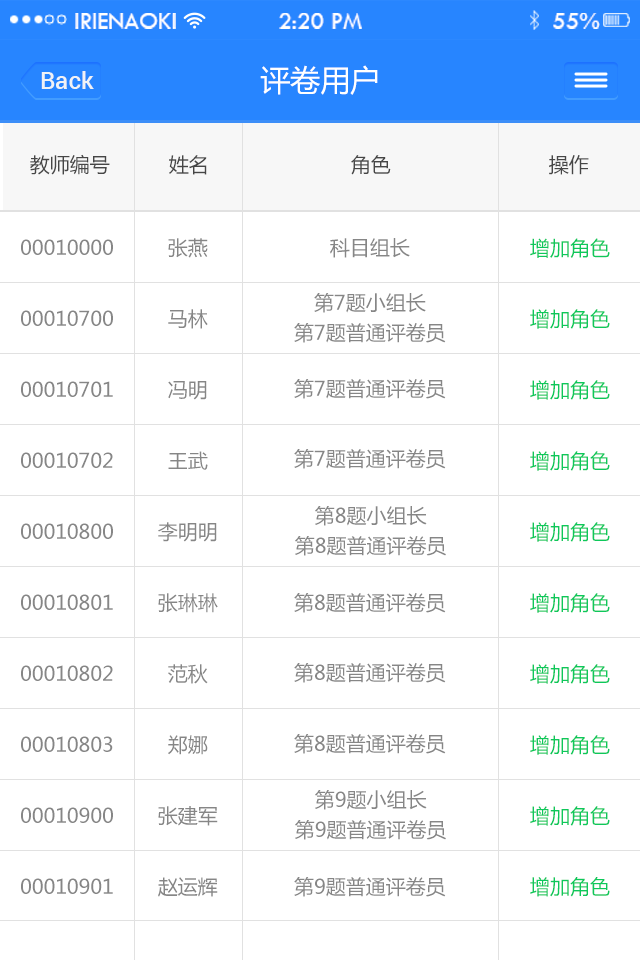
<style>
.page{position:relative;width:640px;height:960px;background:#ffffff}
.page>*{position:absolute;margin:0}
.t1{font:24px "TwCenMT-Regular";color:#ffffff}
.t2{font:30px "MicrosoftYaHei";color:#ffffff}
.t3{font:24px "Roboto-Medium";color:#f0f2f5}
.t4{font:20px "MicrosoftYaHei";color:#464646}
.t5{font:20px/71px "MicrosoftYaHei";color:#868686}
.t6{font:20px "MicrosoftYaHei";color:#868686}
.t7{font:20px/71px "MicrosoftYaHei";color:#0ec85b}
.t8{font:20px/30px "MicrosoftYaHei";color:#868686}
</style>
<div class="page">
<p class="t1" style="left:75px;top:13px;width:101px;height:16px">IRIENAOKI</p>
<p class="t1" style="left:279px;top:13px;width:83px;height:16px">2:20 PM</p>
<p class="t1" style="left:553px;top:13px;width:47px;height:16px">55%</p>
<p class="t2" style="left:260px;top:65px;width:118px;height:30px">评卷用户</p>
<p class="t3" style="left:41px;top:71px;width:53px;height:18px">Back</p>
<p class="t4" style="left:30px;top:154px;width:80px;height:21px">教师编号</p>
<p class="t4" style="left:169px;top:155px;width:38px;height:20px">姓名</p>
<p class="t4" style="left:351px;top:155px;width:40px;height:20px">角色</p>
<p class="t4" style="left:549px;top:155px;width:40px;height:20px">操作</p>
<p class="t5" style="left:21px;top:239px;width:92px;height:655px;text-align:center">00010000<br>00010700<br>00010701<br>00010702<br>00010800<br>00010801<br>00010802<br>00010803<br>00010900<br>00010901</p>
<p class="t5" style="left:158px;top:238px;width:60px;height:659px;text-align:center">张燕<br>马林<br>冯明<br>王武<br>李明明<br>张琳琳<br>范秋<br>郑娜<br>张建军<br>赵运辉</p>
<p class="t6" style="left:330px;top:238px;width:80px;height:20px">科目组长</p>
<p class="t7" style="left:530px;top:238px;width:80px;height:659px;text-align:center">增加角色<br>增加角色<br>增加角色<br>增加角色<br>增加角色<br>增加角色<br>增加角色<br>增加角色<br>增加角色<br>增加角色</p>
<p class="t8" style="left:294px;top:293px;width:152px;height:50px;text-align:center">第7题小组长<br>第7题普通评卷员</p>
<p class="t6" style="left:294px;top:379px;width:152px;height:20px">第7题普通评卷员</p>
<p class="t6" style="left:294px;top:449px;width:152px;height:20px">第7题普通评卷员</p>
<p class="t8" style="left:295px;top:506px;width:151px;height:50px;text-align:center">第8题小组长<br>第8题普通评卷员</p>
<p class="t6" style="left:294px;top:593px;width:152px;height:20px">第8题普通评卷员</p>
<p class="t6" style="left:294px;top:663px;width:152px;height:20px">第8题普通评卷员</p>
<p class="t6" style="left:294px;top:734px;width:152px;height:20px">第8题普通评卷员</p>
<p class="t8" style="left:295px;top:790px;width:151px;height:50px;text-align:center">第9题小组长<br>第9题普通评卷员</p>
<p class="t6" style="left:294px;top:877px;width:152px;height:20px">第9题普通评卷员</p>
</div>
